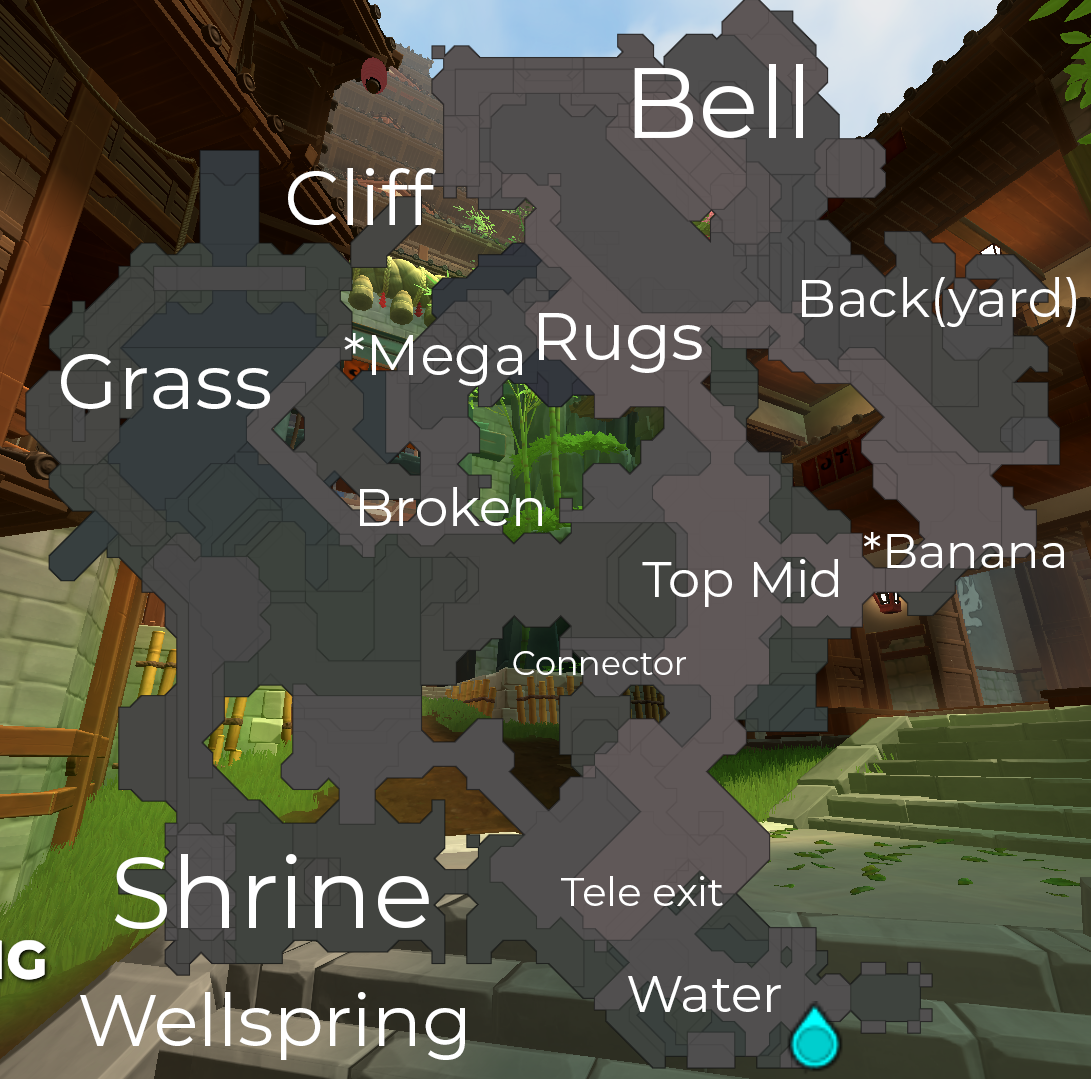
<style>
.page{position:relative;width:1091px;height:1079px}
.page>*{position:absolute;margin:0}
.t1{font:100px "Montserrat-Regular";color:#ffffff}
.t2{font:77.1px "Montserrat-Regular";color:#ffffff}
.t3{font:53.4px "Montserrat-Regular";color:#ffffff}
.t4{font:67.5px "Montserrat-Regular";color:#ffffff}
.t5{font:57.1px "Montserrat-Regular";color:#ffffff}
.t6{font:78.7px "Montserrat-Regular";color:#ffffff}
.t7{font:53.2px "Montserrat-Regular";color:#ffffff}
.t8{font:47.9px "Montserrat-Regular";color:#ffffff}
.t9{font:50.6px "Montserrat-Regular";color:#ffffff}
.t10{font:33.3px "Montserrat-Regular";color:#ffffff}
.t11{font:40.3px "Montserrat-Regular";color:#ffffff}
.t12{font:51.7px "Montserrat-Regular";color:#ffffff}
.t13{font:73.3px "Montserrat-Regular";color:#ffffff}
</style>
<div class="page">
<p class="t1" style="left:634px;top:64px;width:169px;height:74px">Bell</p>
<p class="t2" style="left:288px;top:168px;width:148px;height:57px">Cliff</p>
<p class="t3" style="left:802px;top:277px;width:274px;height:50px">Back(yard)</p>
<p class="t4" style="left:539px;top:313px;width:163px;height:60px">Rugs</p>
<p class="t5" style="left:344px;top:333px;width:178px;height:53px">*Mega</p>
<p class="t6" style="left:61px;top:354px;width:209px;height:55px">Grass</p>
<p class="t7" style="left:360px;top:487px;width:182px;height:39px">Broken</p>
<p class="t8" style="left:864px;top:532px;width:200px;height:36px">*Banana</p>
<p class="t9" style="left:642px;top:559px;width:196px;height:48px">Top Mid</p>
<p class="t10" style="left:513px;top:651px;width:173px;height:24px">Connector</p>
<p class="t1" style="left:115px;top:854px;width:314px;height:75px">Shrine</p>
<p class="t11" style="left:561px;top:876px;width:162px;height:30px">Tele exit</p>
<p class="t12" style="left:628px;top:976px;width:153px;height:36px">Water</p>
<p class="t13" style="left:80px;top:992px;width:385px;height:68px">Wellspring</p>
</div>
